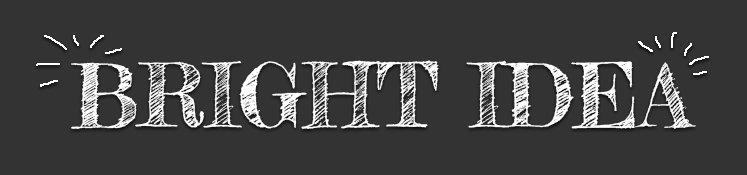
<style>
.page{position:relative;width:747px;height:175px;background:#333333}
.page>*{position:absolute;margin:0}
.t1{font:87px "FrederickatheGreat-Regular";color:#ffffff}
</style>
<div class="page">
<p class="t1" style="left:71px;top:60px;width:625px;height:69px">BRIGHT IDEA</p>
</div>
